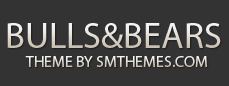
<style>
.page{position:relative;width:229px;height:86px;background:#333333}
.page>*{position:absolute;margin:0}
.t1{font:37px "MyriadPro-Regular";text-transform:uppercase}
.t2{font:16px "MyriadPro-Regular";text-transform:uppercase}
</style>
<div class="page">
<p class="t1" style="left:7px;top:23px;width:214px;height:25px">bulls&amp;bears</p>
<p class="t2" style="left:25px;top:56px;width:182px;height:11px">theme by SMThemes.com</p>
</div>
